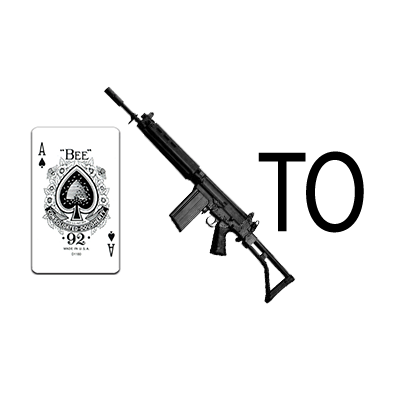
<style>
.page{position:relative;width:400px;height:400px;background:#ffffff}
.page>*{position:absolute;margin:0}
.t1{font:115.9px "MyriadPro-Regular";color:#000000;scale:0.8 1}
</style>
<div class="page">
<p class="t1" style="left:258px;top:151px;width:106px;height:82px">TO</p>
</div>
